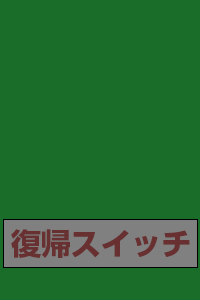
<style>
.page{position:relative;width:200px;height:300px;background:#1a6d28}
.page>*{position:absolute;margin:0}
.t1{font:30px "ShinGoPro-Bold";color:#683030}
</style>
<div class="page">
<p class="t1" style="left:11px;top:229px;width:179px;height:29px">復帰スイッチ</p>
</div>
